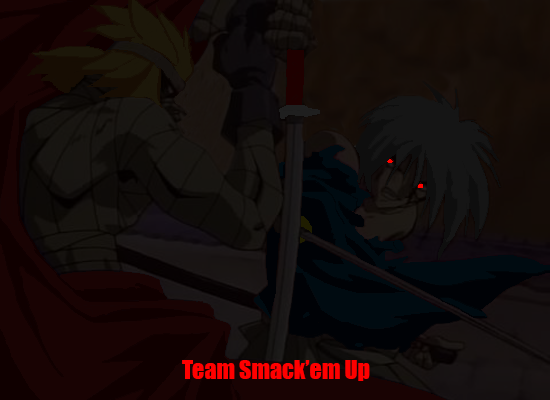
<style>
.page{position:relative;width:550px;height:400px}
.page>*{position:absolute;margin:0}
.t1{font:24px "Impact";color:#ff0000}
</style>
<div class="page">
<p class="t1" style="left:182px;top:360px;width:188px;height:21px">Team Smack’em Up</p>
</div>
